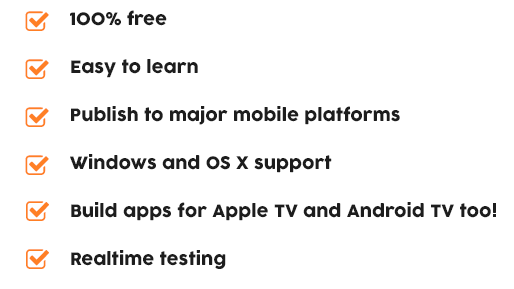
<style>
.page{position:relative;width:514px;height:289px;background:#ffffff}
.page>*{position:absolute;margin:0}
.t1{font:17px/48px "COCOGOOSE";color:#1d1d1d}
</style>
<div class="page">
<p class="t1" style="left:70px;top:10px;width:426px;height:259px">100% free<br>Easy to learn<br>Publish to major mobile platforms<br>Windows and OS X support<br>Build apps for Apple TV and Android TV too!<br>Realtime testing</p>
</div>
